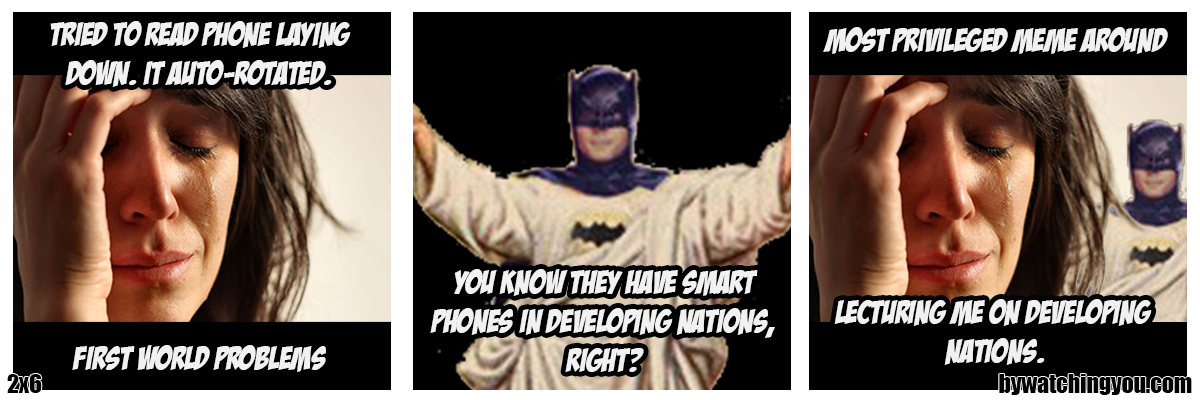
<style>
.page{position:relative;width:1200px;height:400px;background:#000000}
.page>*{position:absolute;margin:0}
.t1{font:32.6px "BadaBoomBB";color:#f1f1f1}
.t2{font:23.7px "Impact";color:#000000}
</style>
<div class="page">
<p class="t1" style="left:50px;top:21px;width:301px;height:66px;text-align:center">tried to read phone laying<br>down. It auto-rotated.</p>
<p class="t1" style="left:823px;top:27px;width:345px;height:27px">most privileged meme around</p>
<p class="t1" style="left:430px;top:269px;width:345px;height:103px;text-align:center">you know they have smart<br>phones in developing nations,<br>right?</p>
<p class="t1" style="left:834px;top:299px;width:318px;height:66px;text-align:center">lecturing me on developing <br>nations.</p>
<p class="t1" style="left:72px;top:345px;width:254px;height:27px">first world problems</p>
<p class="t2" style="left:7px;top:374px;width:35px;height:19px">2x6</p>
<p class="t2" style="left:999px;top:374px;width:193px;height:21px">bywatchingyou.com</p>
</div>
